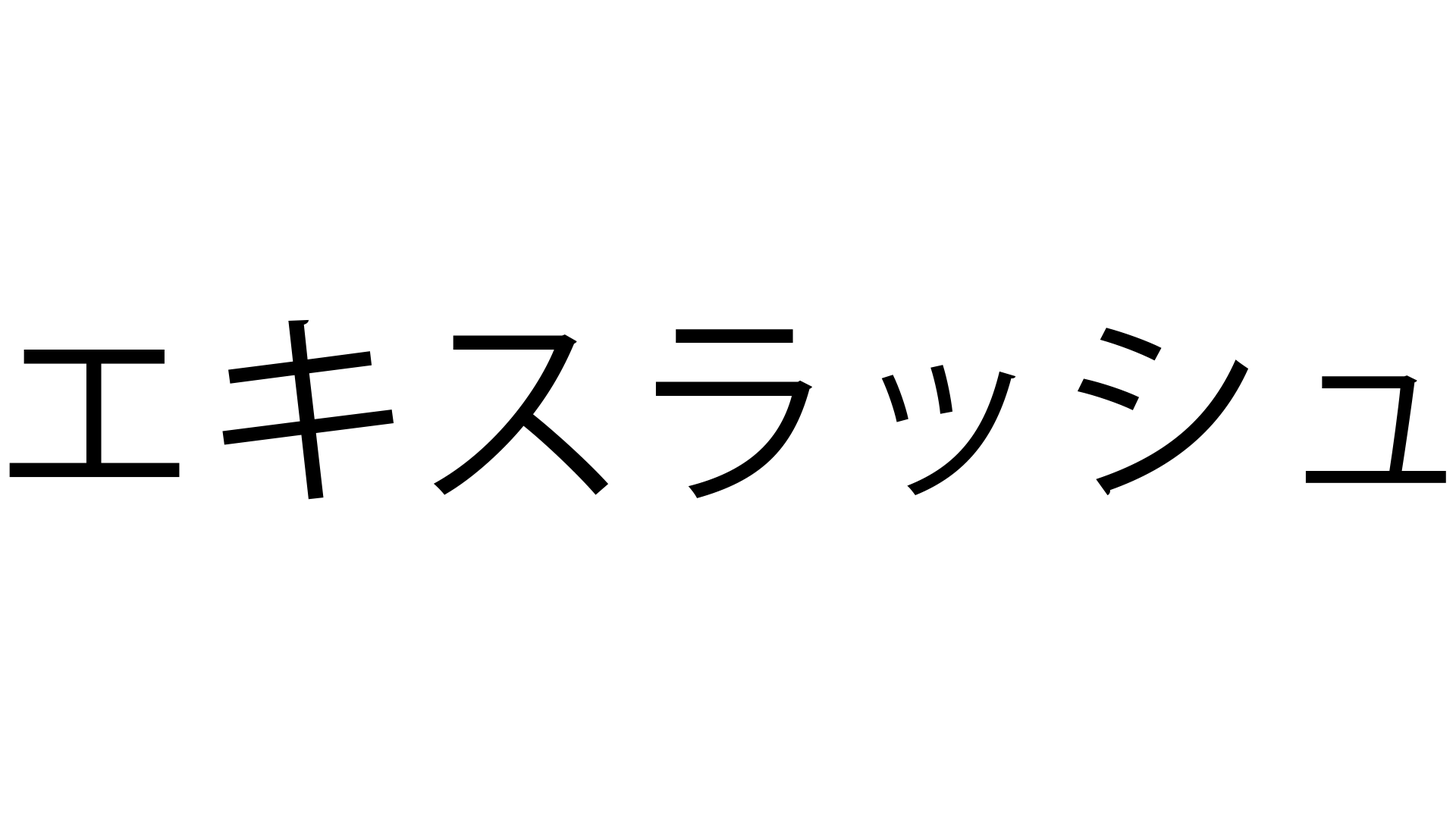
<style>
.page{position:relative;width:1456px;height:819px;background:#ffffff}
.page>*{position:absolute;margin:0}
.t1{font:205.4px "KozGoPr6N-Regular";letter-spacing:0.04em;color:#000000}
</style>
<div class="page">
<p class="t1" style="left:9px;top:319px;width:1437px;height:181px">エキスラッシュ</p>
</div>
